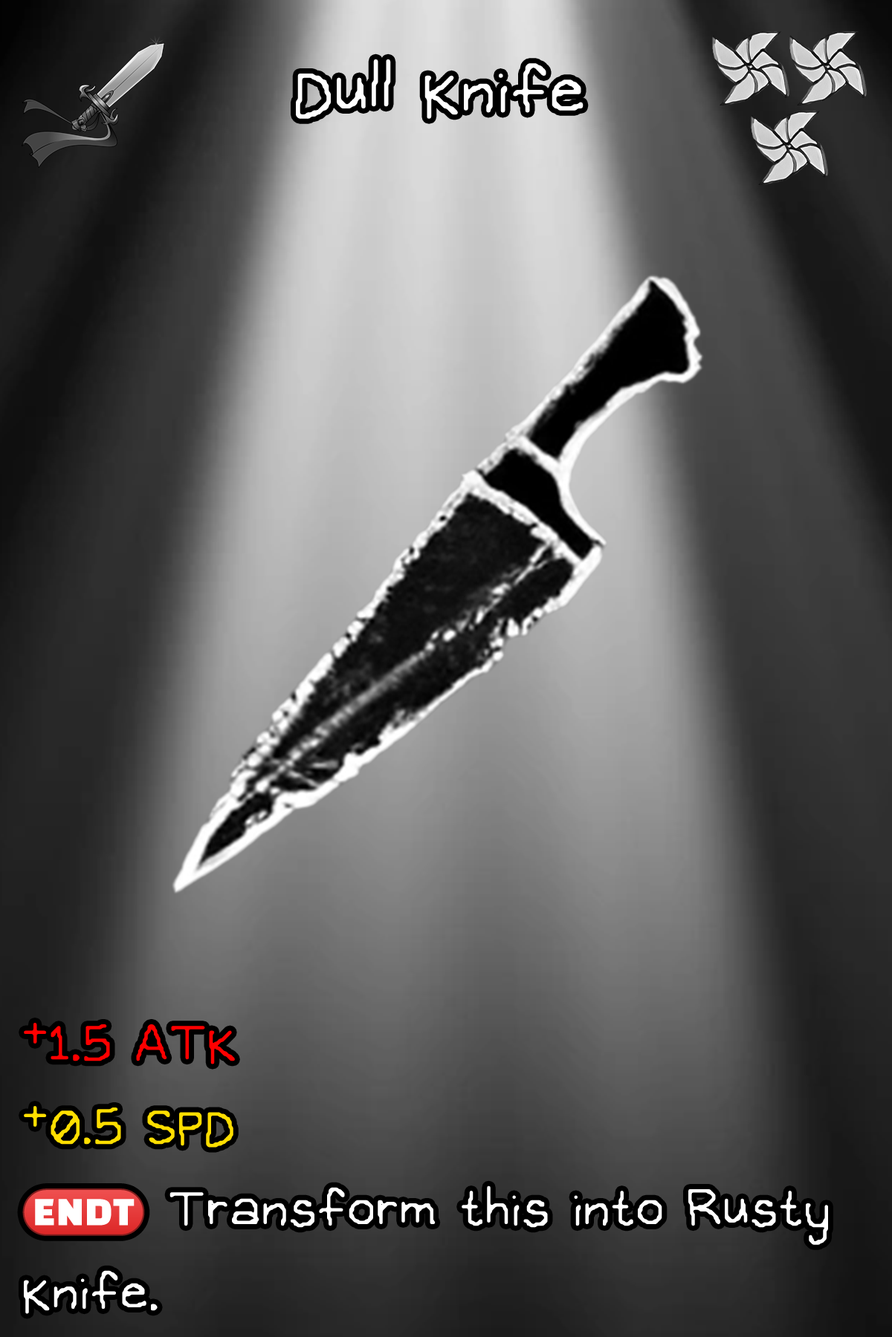
<style>
.page{position:relative;width:892px;height:1337px}
.page>*{position:absolute;margin:0}
.t1{font:170.9px "OMORI_GAME2";color:#ffffff}
.t2{font:132.3px/83.2px "OMORI_GAME";color:#ffffff}
.t3{font:132.3px/83.2px "OMORI_GAME";color:#ff0000}
.t4{font:132.3px/83.2px "OMORI_GAME";color:#ffde00}
.t5{font:82.7px/83.2px "stoogedings-Regular";color:#ffffff}
</style>
<div class="page">
<p class="t1" style="left:296px;top:59px;width:287px;height:60px">Dull Knife</p>
<p class="t2" style="left:22px;top:1023px;width:806px;height:291px"><span class="t3">+1.5 ATK<br></span><span class="t4">+0.5 SPD<br></span><span class="t5">(ENDT)</span> Transform this into Rusty Knife.</p>
</div>
